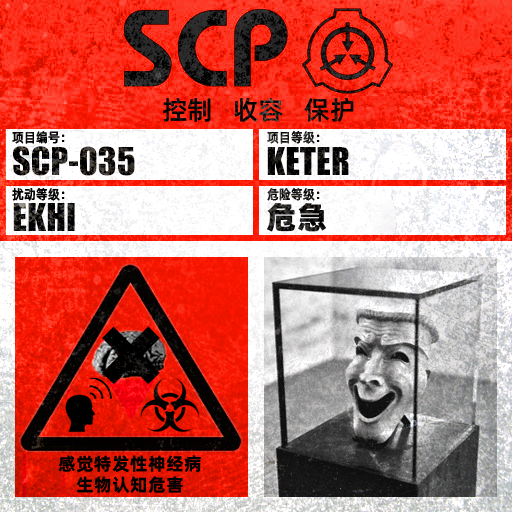
<style>
.page{position:relative;width:512px;height:512px}
.page>*{position:absolute;margin:0}
.t1{font:26px "AlibabaPuHuiTiM";color:#000000}
.t2{font:13.3px "AlibabaPuHuiTiM";letter-spacing:0.02em;color:#000000;scale:0.9 1}
.t3{font:13.3px "AlibabaPuHuiTiM";letter-spacing:0.02em;scale:0.9 1}
.t4{font:30.3px "AlibabaPuHuiTiH";letter-spacing:0.02em}
.t5{font:18px/21px "AlibabaPuHuiTiB";letter-spacing:0.02em;color:#000000}
</style>
<div class="page">
<p class="t1" style="left:163px;top:97px;width:191px;height:26px">控制   收容   保护</p>
<p class="t2" style="left:12px;top:131px;width:53px;height:13px">项目编号：</p>
<p class="t3" style="left:267px;top:131px;width:53px;height:13px">项目等级：</p>
<p class="t2" style="left:12px;top:188px;width:53px;height:13px">扰动等级：</p>
<p class="t3" style="left:267px;top:188px;width:53px;height:13px">危险等级：</p>
<p class="t4" style="left:267px;top:203px;width:59px;height:29px">危急</p>
<p class="t5" style="left:58px;top:455px;width:143px;height:39px;text-align:center">感觉特发性神经病<br>生物认知危害</p>
</div>
